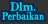
<style>
.page{position:relative;width:48px;height:24px;background:#333333}
.page>*{position:absolute;margin:0}
.t1{font:11.2px "RyuminPro-ExBold";letter-spacing:-0.04em;color:#00d9dc;scale:1.12 1}
.t2{font:10px "RyuminPro-ExBold";letter-spacing:-0.04em;color:#00d9dc;scale:0.9 1}
</style>
<div class="page">
<p class="t1" style="left:10px;top:2px;width:26px;height:9px">Dlm.</p>
<p class="t2" style="left:2px;top:12px;width:43px;height:8px">Perbaikan</p>
</div>
